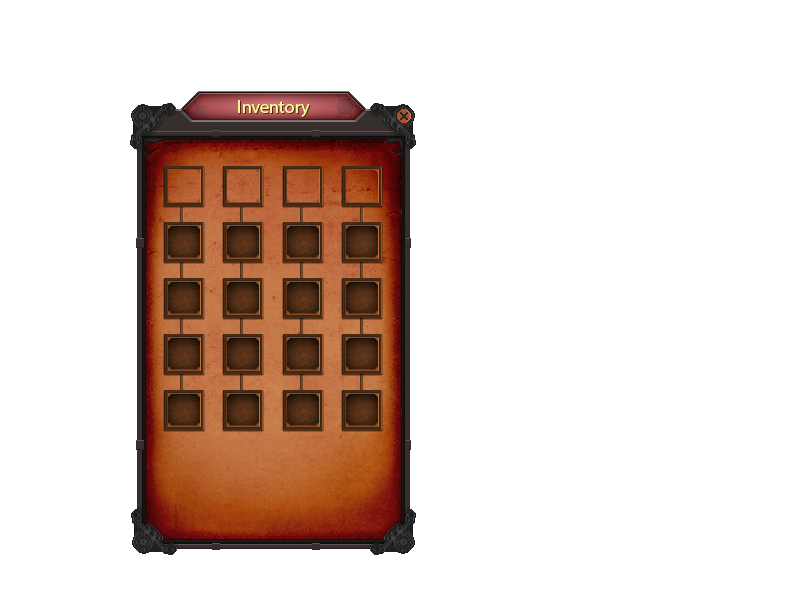
<style>
.page{position:relative;width:800px;height:600px;background:#ffffff}
.page>*{position:absolute;margin:0}
.t1{font:18px "MyriadPro-Regular";color:#fff799}
</style>
<div class="page">
<p class="t1" style="left:238px;top:100px;width:72px;height:17px">Inventory</p>
</div>
